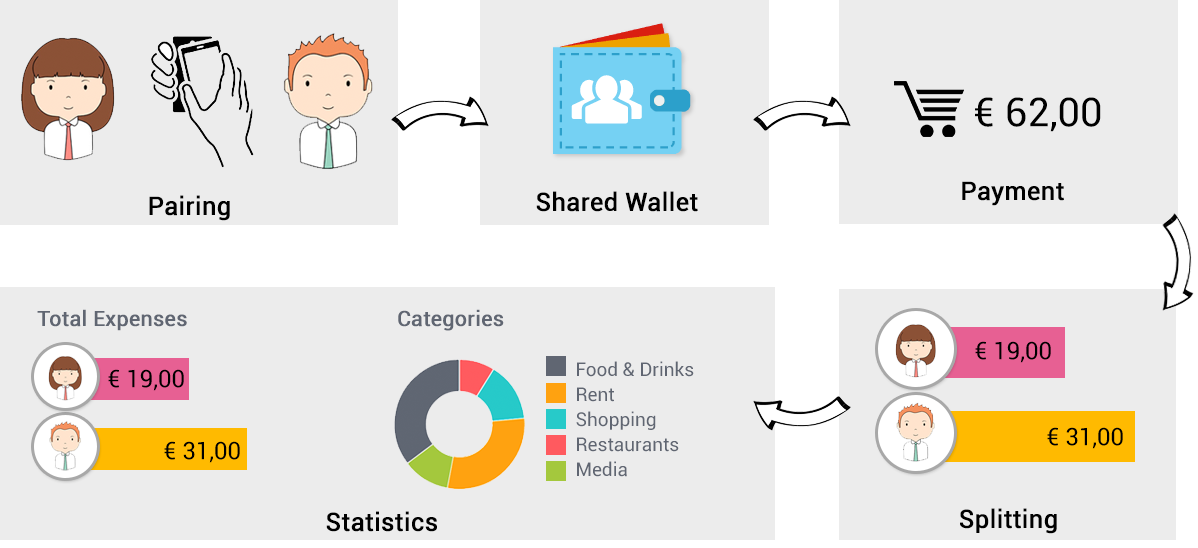
<style>
.page{position:relative;width:1198px;height:548px;background:#ececec}
.page>*{position:absolute;margin:0}
.t1{font:40px "Roboto-Regular";color:#000000}
.t2{font:25px "Roboto-Regular";color:#000000;font-weight:bold}
.t3{font:21px "Roboto-Regular";color:#606672;font-weight:bold}
.t4{font:24px "Roboto-Regular";color:#000000}
.t5{font:19px/25px "Roboto-Regular";color:#606672}
</style>
<div class="page">
<p class="t1" style="left:975px;top:97px;width:126px;height:35px">€ 62,00</p>
<p class="t2" style="left:962px;top:181px;width:102px;height:25px">Payment</p>
<p class="t2" style="left:149px;top:195px;width:81px;height:26px">Pairing</p>
<p class="t2" style="left:536px;top:191px;width:162px;height:21px">Shared Wallet</p>
<p class="t3" style="left:37px;top:309px;width:150px;height:22px">Total Expenses</p>
<p class="t3" style="left:398px;top:309px;width:106px;height:22px">Categories</p>
<p class="t4" style="left:975px;top:341px;width:76px;height:22px">€ 19,00</p>
<p class="t5" style="left:576px;top:361px;width:118px;height:116px">Food &amp; Drinks<br>Rent<br>Shopping<br>Restaurants<br>Media</p>
<p class="t4" style="left:108px;top:369px;width:76px;height:22px">€ 19,00</p>
<p class="t4" style="left:1047px;top:427px;width:76px;height:22px">€ 31,00</p>
<p class="t4" style="left:164px;top:441px;width:76px;height:22px">€ 31,00</p>
<p class="t2" style="left:960px;top:508px;width:97px;height:26px">Splitting</p>
<p class="t2" style="left:326px;top:511px;width:111px;height:21px">Statistics</p>
</div>
